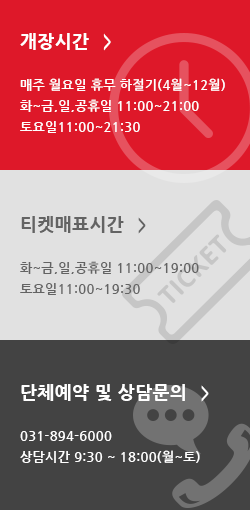
<style>
.page{position:relative;width:250px;height:510px;background:#e1e1e1}
.page>*{position:absolute;margin:0}
.t1{font:13px/21px "NanumGothicBold";letter-spacing:0.025em;color:#ffffff}
.t2{font:18px/21px "NanumGothicExtraBold";letter-spacing:0.025em;color:#ffffff}
.t3{font:16.5px/21px "NanumGothicExtraBold";letter-spacing:0.025em;color:#ffffff;scale:0.91 1}
.t4{font:13px/21px "NanumGothicBold";letter-spacing:0.025em;color:#636363}
.t5{font:18px/21px "NanumGothicExtraBold";letter-spacing:0.025em;color:#636363}
.t6{font:15px/21px "NanumGothicExtraBold";letter-spacing:0.025em;color:#636363}
.t7{font:15px/21px "NanumGothicExtraBold";letter-spacing:0.025em;color:#ffffff}
</style>
<div class="page">
<p class="t1" style="left:20px;top:33px;width:205px;height:100px;text-align:justify"><span class="t2">개장시간</span><span class="t3">   &gt;<br><br></span>매주 월요일 휴무 하절기(4월~12월)<br>화~금,일,공휴일 11:00~21:00<br>토요일11:00~21:30</p>
<p class="t4" style="left:20px;top:216px;width:179px;height:79px;text-align:justify"><span class="t5">티켓매표시간</span><span class="t6">   &gt;<br></span><br>화~금,일,공휴일 11:00~19:00<br>토요일11:00~19:30</p>
<p class="t1" style="left:20px;top:384px;width:189px;height:79px;text-align:justify"><span class="t2">단체예약 및 상담문의</span><span class="t7">   &gt;<br></span><br>031-894-6000 <br>상담시간 9:30 ~ 18:00(월~토)</p>
</div>
